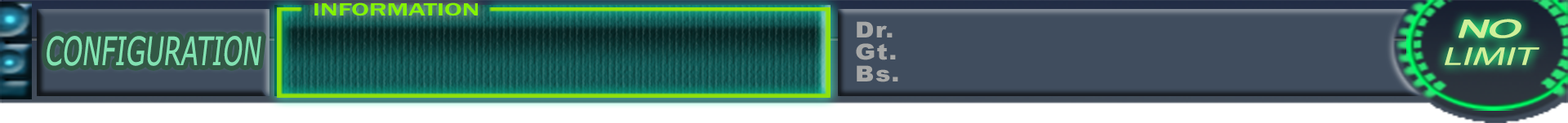
<style>
.page{position:relative;width:1568px;height:123px;background:#404d5e}
.page>*{position:absolute;margin:0}
.t1{font:18px "FranklinGothic-Medium";color:#84f400;scale:1.52 1}
.t2{font:22.1px "Arial-Black";letter-spacing:0.05em;color:#a7a8a7;scale:1.11 1}
.t3{font:25.8px/27.6px "MyriadPro-Regular";color:#d0f09a;font-style:italic;scale:1.6 1}
.t4{font:25.8px/27.6px "MyriadPro-Regular";letter-spacing:-0.05em;color:#d0f09a;font-weight:bold;font-style:italic;scale:1.86 1}
.t5{font:39.2px "MSReferenceSansSerif";color:#82e2b2;font-style:italic;scale:0.64 1}
</style>
<div class="page">
<p class="t1" style="left:314px;top:2px;width:164px;height:14px">INFORMATION</p>
<p class="t2" style="left:856px;top:21px;width:42px;height:61px">Dr.<br>Gt.<br>Bs.</p>
<p class="t3" style="left:1445px;top:19px;width:94px;height:46px;text-align:center"><span class="t4">NO<br></span>LIMIT</p>
<p class="t5" style="left:47px;top:36px;width:214px;height:30px">CONFIGURATION</p>
</div>
